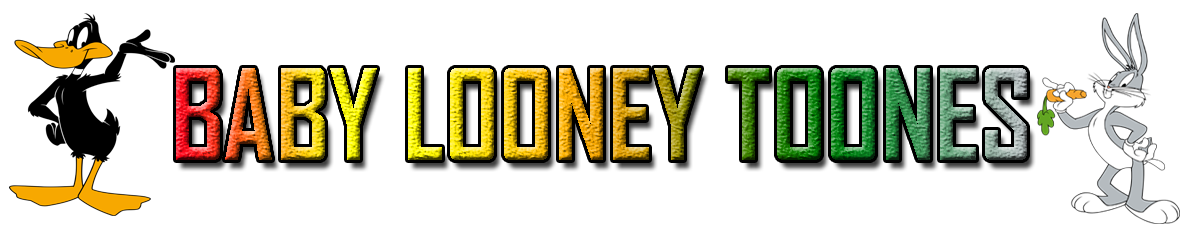
<style>
.page{position:relative;width:1200px;height:250px;background:#ffffff}
.page>*{position:absolute;margin:0}
.t1{font:120.1px "AgencyFB-Bold";scale:0.95 1}
</style>
<div class="page">
<p class="t1" style="left:176px;top:68px;width:851px;height:92px">BABY LOONEY TOONES</p>
</div>
